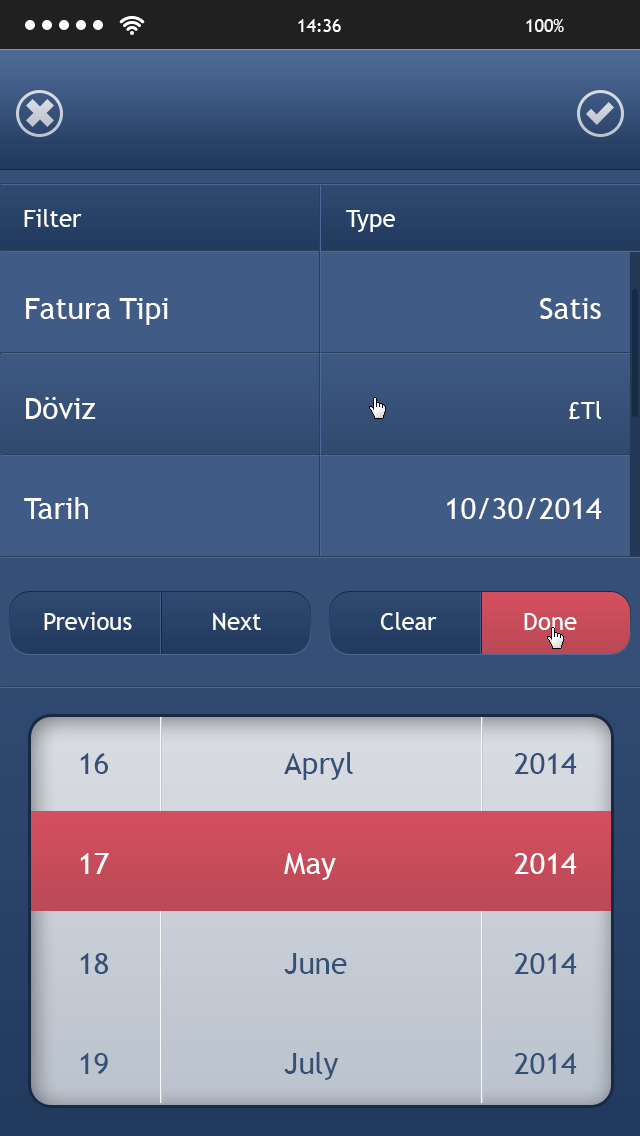
<style>
.page{position:relative;width:640px;height:1136px}
.page>*{position:absolute;margin:0}
.t1{font:24px "TrebuchetMS";color:#ffffff}
.t2{font:30px/100px "TrebuchetMS";color:#ffffff}
.t3{font:24px/100px "TrebuchetMS";color:#ffffff}
.t4{font:30px/100px "TrebuchetMS";color:#354f77}
</style>
<div class="page">
<p class="t1" style="left:24px;top:209px;width:58px;height:18px">Filter</p>
<p class="t1" style="left:346px;top:210px;width:49px;height:22px">Type</p>
<p class="t2" style="left:24px;top:298px;width:144px;height:221px">Fatura Tipi<br>Döviz<br>Tarih</p>
<p class="t2" style="left:447px;top:298px;width:155px;height:221px;text-align:right">Satis<br><span class="t3">£Tl<br></span>10/30/2014</p>
<p class="t1" style="left:44px;top:612px;width:217px;height:18px">Previous           Next</p>
<p class="t1" style="left:381px;top:612px;width:196px;height:18px">Clear            Done</p>
<p class="t4" style="left:80px;top:753px;width:29px;height:321px">16<br><span class="t2">17<br></span>18<br>19</p>
<p class="t4" style="left:284px;top:752px;width:69px;height:328px">Apryl<br><span class="t2">May<br></span>June<br>July</p>
<p class="t4" style="left:514px;top:753px;width:63px;height:321px">2014<br><span class="t2">2014<br></span>2014<br>2014</p>
</div>
